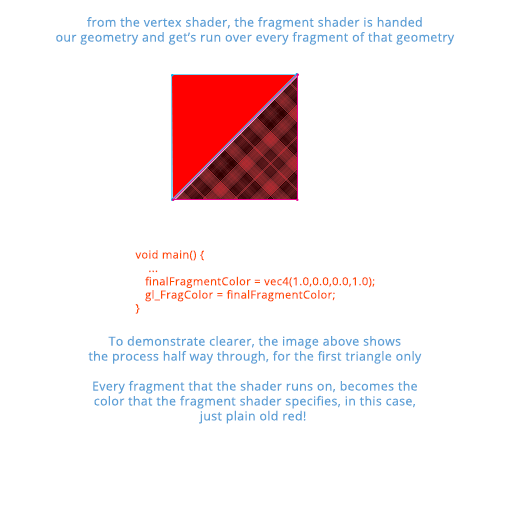
<style>
.page{position:relative;width:512px;height:512px;background:#ffffff}
.page>*{position:absolute;margin:0}
.t1{font:12.5px "OpenSans";letter-spacing:0.03em;color:#5ba0d7}
.t2{font:11.1px "OpenSans";letter-spacing:0.03em;color:#ff4b03}
</style>
<div class="page">
<p class="t1" style="left:56px;top:17px;width:399px;height:28px;text-align:center">from the vertex shader, the fragment shader is handed<br>our geometry and get’s run over every fragment of that geometry</p>
<p class="t2" style="left:135px;top:250px;width:240px;height:64px">void main() {<br>    ... <br>   finalFragmentColor = vec4(1.0,0.0,0.0,1.0);<br>   gl_FragColor = finalFragmentColor;<br>}</p>
<p class="t1" style="left:88px;top:336px;width:334px;height:88px;text-align:center">To demonstrate clearer, the image above shows<br>the process half way through, for the first triangle only<br><br>Every fragment that the shader runs on, becomes the<br>color that the fragment shader specifies, in this case,<br>just plain old red!</p>
</div>
